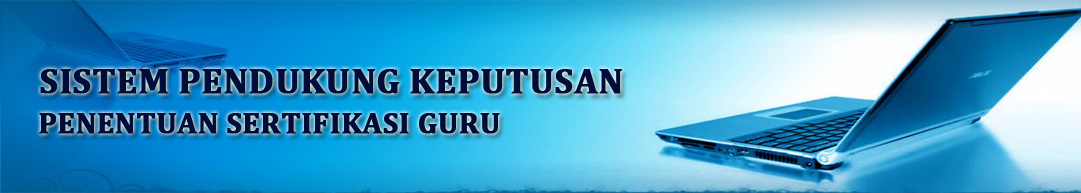
<style>
.page{position:relative;width:1081px;height:193px}
.page>*{position:absolute;margin:0}
.t1{font:36px "Cambria-Bold";color:#000d3b;font-weight:bold}
.t2{font:30px "Cambria-Bold";color:#000d3b;font-weight:bold}
</style>
<div class="page">
<p class="t1" style="left:40px;top:69px;width:582px;height:25px">SISTEM PENDUKUNG KEPUTUSAN</p>
<p class="t2" style="left:39px;top:113px;width:461px;height:21px">PENENTUAN SERTIFIKASI GURU</p>
</div>
